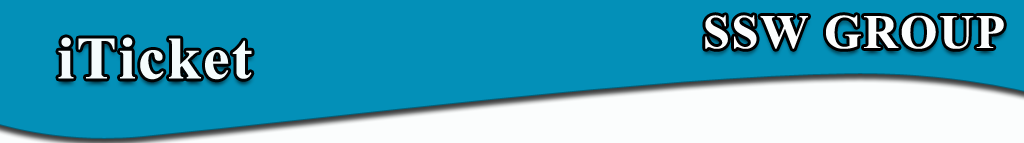
<style>
.page{position:relative;width:1024px;height:143px;background:#0390b8}
.page>*{position:absolute;margin:0}
.t1{font:48px "TimesNewRomanPS-BoldMT";letter-spacing:0.04em;color:#fbfdfd}
.t2{font:60px "TimesNewRomanPS-BoldMT";letter-spacing:0.04em;color:#fafcfc}
</style>
<div class="page">
<p class="t1" style="left:705px;top:15px;width:299px;height:34px">SSW GROUP</p>
<p class="t2" style="left:58px;top:37px;width:194px;height:43px">iTicket</p>
</div>
